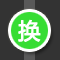
<style>
.page{position:relative;width:60px;height:60px;background:#333333}
.page>*{position:absolute;margin:0}
.t1{font:22px "MicrosoftYaHei";letter-spacing:0.02em;color:#ffffff;font-weight:bold}
</style>
<div class="page">
<p class="t1" style="left:18px;top:19px;width:23px;height:23px">换</p>
</div>
